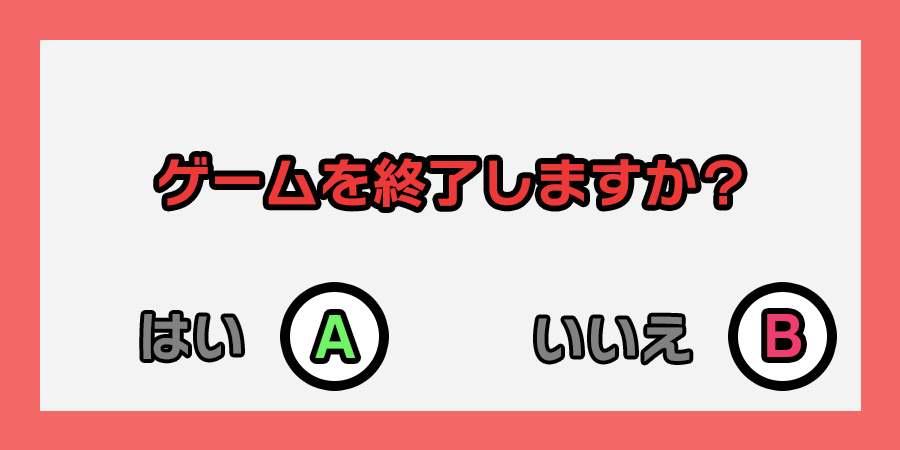
<style>
.page{position:relative;width:900px;height:450px;background:#f3f3f3}
.page>*{position:absolute;margin:0}
.t1{font:54.2px "NitalagoRuika-06";color:#ee3939}
.t2{font:54.2px "NitalagoRuika-06";color:#71f567}
.t3{font:54.2px "NitalagoRuika-06";color:#ee3d6f}
</style>
<div class="page">
<p class="t1" style="left:159px;top:157px;width:583px;height:50px">ゲームを終了しますか？</p>
<p class="t2" style="left:315px;top:315px;width:41px;height:43px">A</p>
<p class="t3" style="left:767px;top:314px;width:34px;height:43px">B</p>
</div>
